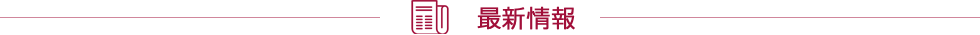
<style>
.page{position:relative;width:980px;height:35px;background:#ffffff}
.page>*{position:absolute;margin:0}
.t1{font:24px "ShinGoPro-Light";color:#a10f39;font-weight:bold}
</style>
<div class="page">
<p class="t1" style="left:477px;top:6px;width:98px;height:24px">最新情報</p>
</div>
